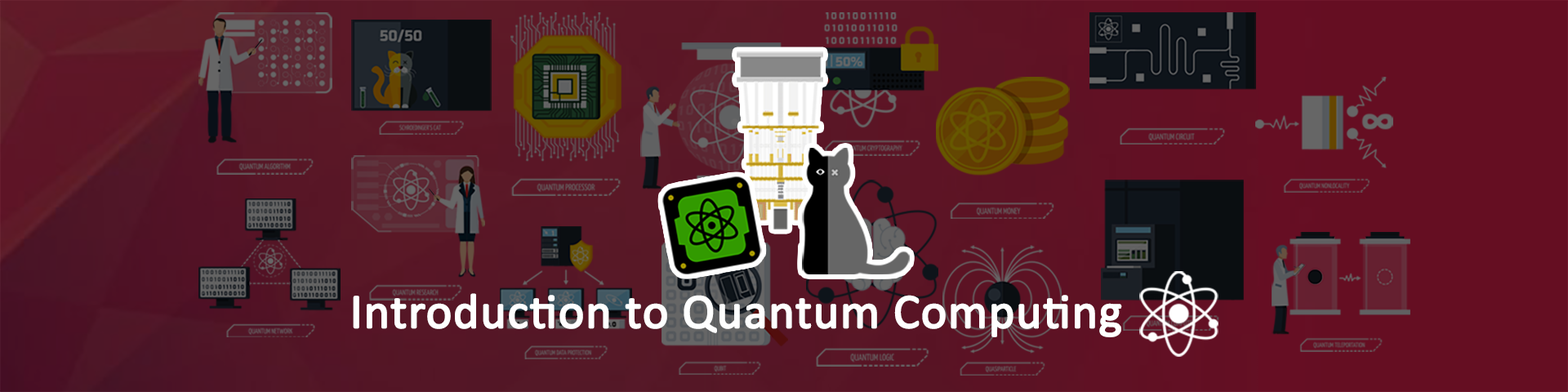
<style>
.page{position:relative;width:1568px;height:392px}
.page>*{position:absolute;margin:0}
.t1{font:49.2px "Calibri";color:#ffffff;font-weight:bold}
</style>
<div class="page">
<p class="t1" style="left:353px;top:293px;width:769px;height:44px">Introduction to Quantum Computing</p>
</div>
